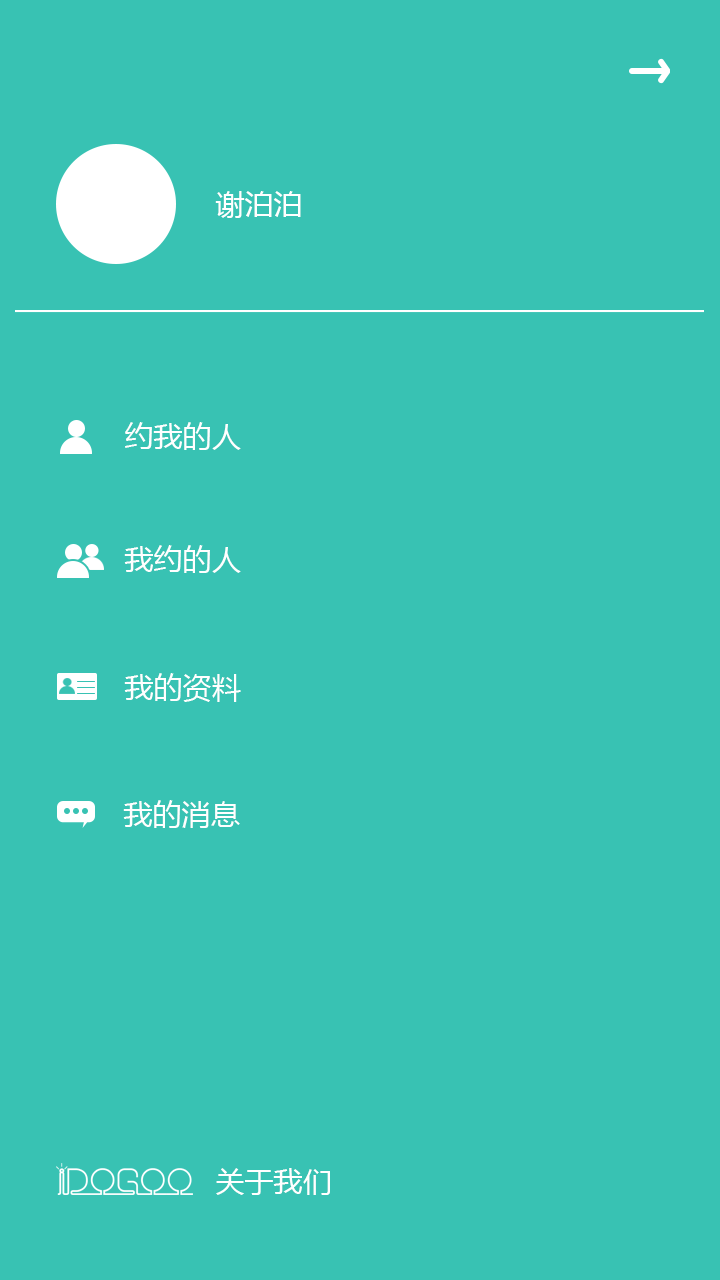
<style>
.page{position:relative;width:720px;height:1280px;background:#38c2b3}
.page>*{position:absolute;margin:0}
.t1{font:29.2px "MicrosoftYaHei";color:#ffffff}
</style>
<div class="page">
<p class="t1" style="left:215px;top:191px;width:86px;height:27px">谢泊泊</p>
<p class="t1" style="left:125px;top:422px;width:116px;height:28px">约我的人</p>
<p class="t1" style="left:124px;top:545px;width:117px;height:28px">我约的人</p>
<p class="t1" style="left:124px;top:673px;width:117px;height:29px">我的资料</p>
<p class="t1" style="left:123px;top:800px;width:117px;height:28px">我的消息</p>
<p class="t1" style="left:216px;top:1168px;width:114px;height:27px">关于我们</p>
</div>
